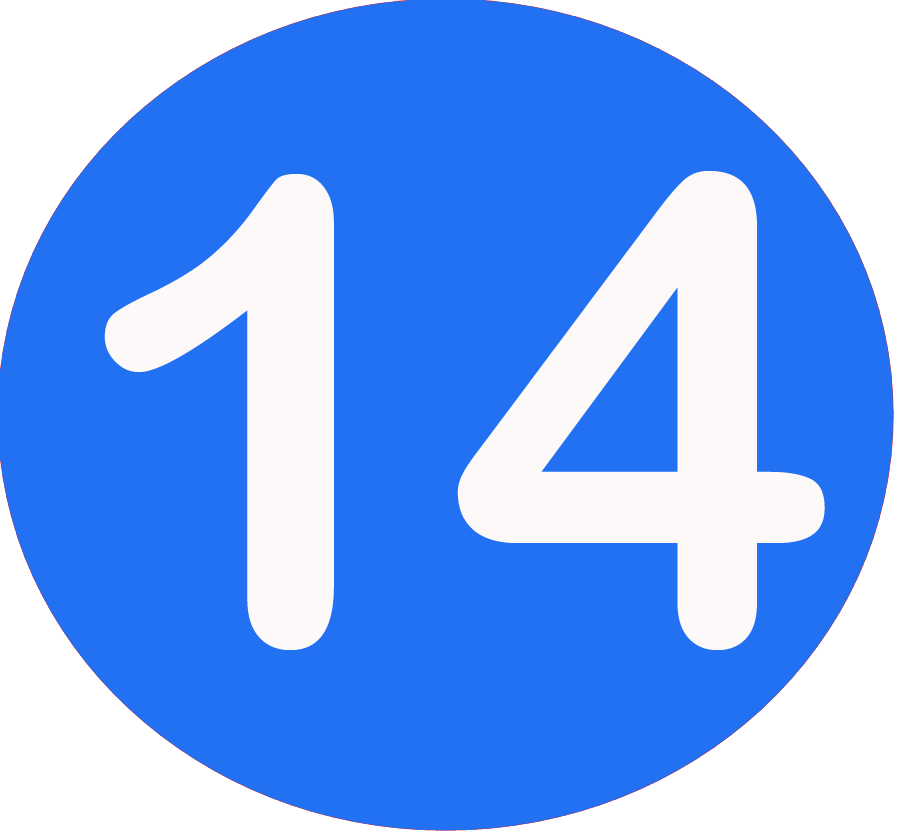
<style>
.page{position:relative;width:900px;height:838px;background:#2271f3}
.page>*{position:absolute;margin:0}
.t1{font:650px "ArialRoundedMTBold";color:#fdf9f9}
</style>
<div class="page">
<p class="t1" style="left:104px;top:170px;width:721px;height:480px">14</p>
</div>
